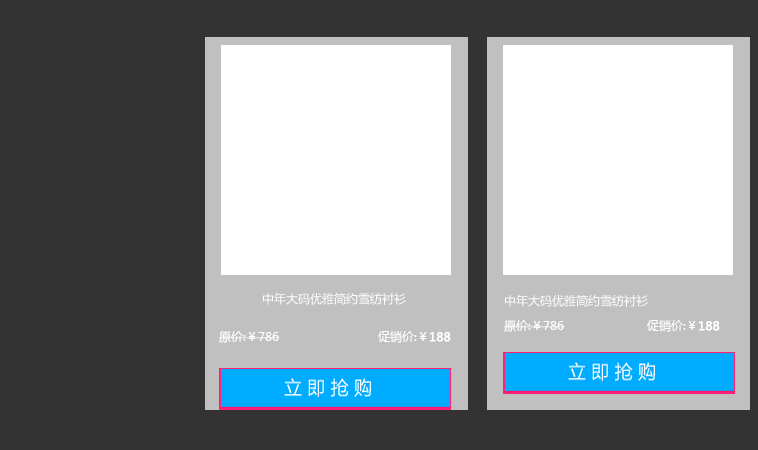
<style>
.page{position:relative;width:758px;height:450px;background:#333333}
.page>*{position:absolute;margin:0}
.t1{font:12px "MicrosoftYaHei";color:#ffffff}
.t2{font:12px "MicrosoftYaHei";color:#ffffff;font-weight:bold}
</style>
<div class="page">
<p class="t1" style="left:263px;top:292px;width:143px;height:13px">中年大码优雅简约雪纺衬衫</p>
<p class="t1" style="left:505px;top:294px;width:143px;height:13px">中年大码优雅简约雪纺衬衫</p>
<p class="t1" style="left:504px;top:320px;width:61px;height:12px">原价:￥786</p>
<p class="t1" style="left:647px;top:319px;width:73px;height:13px">促销价:￥<span class="t2">188</span></p>
<p class="t1" style="left:219px;top:331px;width:61px;height:12px">原价:￥786</p>
<p class="t1" style="left:378px;top:330px;width:73px;height:13px">促销价:￥<span class="t2">188</span></p>
</div>
